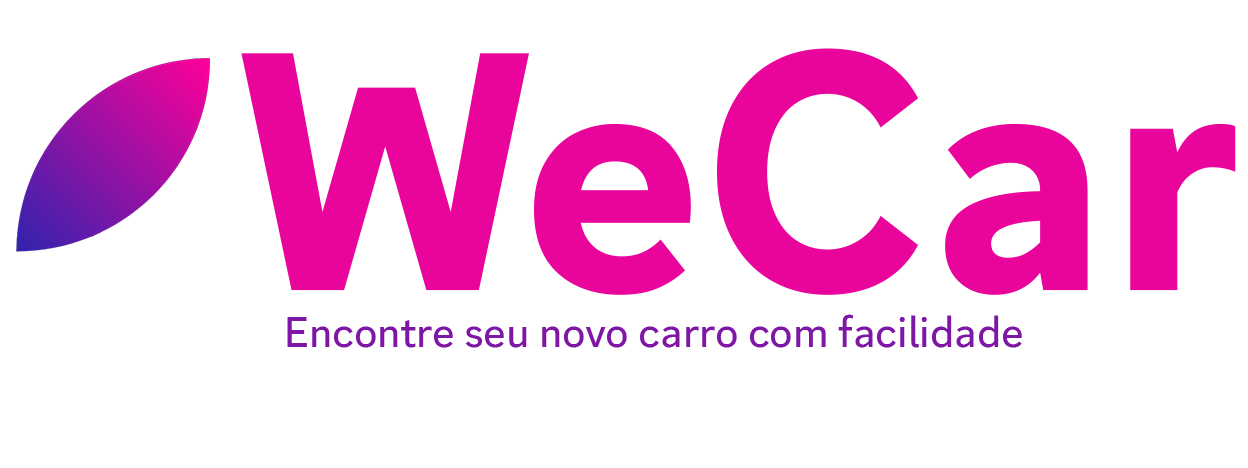
<style>
.page{position:relative;width:1248px;height:468px;background:#ffffff}
.page>*{position:absolute;margin:0}
.t1{font:343.5px "ggsans-Bold";color:#e9049b}
.t2{font:43.6px "ggsans-Medium";color:#7e16a6}
</style>
<div class="page">
<p class="t1" style="left:241px;top:48px;width:995px;height:247px">WeCar</p>
<p class="t2" style="left:287px;top:314px;width:735px;height:34px">Encontre seu novo carro com facilidade</p>
</div>
